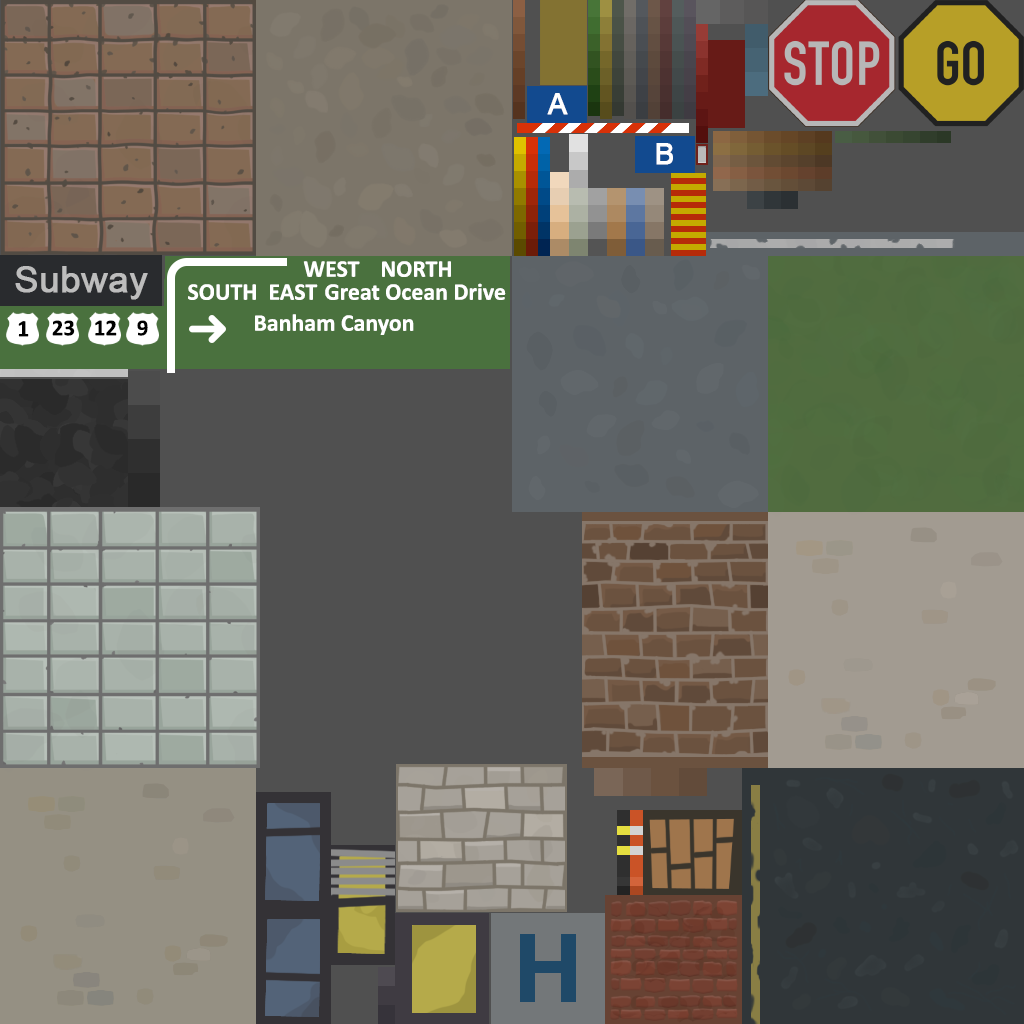
<style>
.page{position:relative;width:1024px;height:1024px}
.page>*{position:absolute;margin:0}
.t1{font:29.1px "ArialMT";color:#ffffff;font-weight:bold}
.t2{font:36px "ArialMT";color:#bdbdbd;font-weight:bold}
.t3{font:24px "Calibri-Bold";color:#ffffff}
.t4{font:23px "Calibri-Bold";color:#000000}
</style>
<div class="page">
<p class="t1" style="left:547px;top:93px;width:21px;height:22px">A</p>
<p class="t1" style="left:656px;top:143px;width:17px;height:22px">B</p>
<p class="t2" style="left:15px;top:266px;width:133px;height:34px">Subway</p>
<p class="t3" style="left:303px;top:261px;width:57px;height:16px">WEST</p>
<p class="t3" style="left:382px;top:261px;width:69px;height:16px">NORTH</p>
<p class="t3" style="left:188px;top:284px;width:68px;height:16px">SOUTH</p>
<p class="t3" style="left:270px;top:284px;width:48px;height:16px">EAST</p>
<p class="t3" style="left:325px;top:283px;width:181px;height:17px">Great Ocean Drive</p>
<p class="t3" style="left:255px;top:314px;width:159px;height:21px">Banham Canyon</p>
<p class="t4" style="left:52px;top:320px;width:23px;height:16px">23</p>
<p class="t4" style="left:95px;top:320px;width:22px;height:16px">12</p>
<p class="t4" style="left:137px;top:320px;width:11px;height:16px">9</p>
</div>
